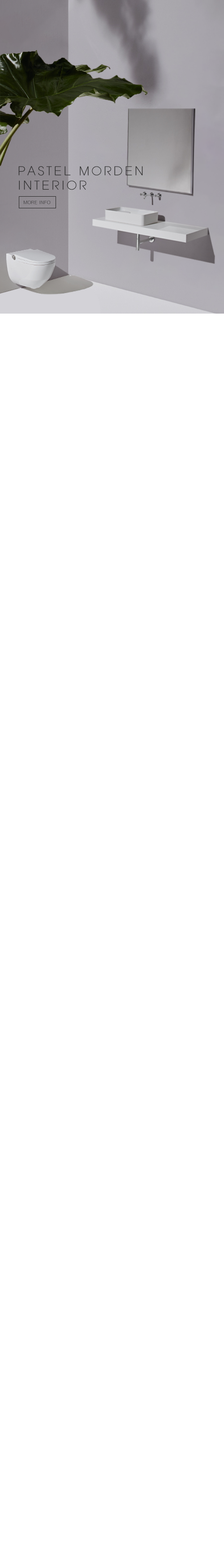
<style>
.page{position:relative;width:224px;height:1568px;background:#ffffff}
.page>*{position:absolute;margin:0}
.t1{font:14.3px/14.3px "HYnamL";letter-spacing:0.1em;color:#292929}
.t2{font:4.8px "Haansoft-Dotum";letter-spacing:0.025em;color:#292929}
</style>
<div class="page">
<p class="t1" style="left:18px;top:166px;width:125px;height:24px">PASTEL MORDEN<br>INTERIOR</p>
<p class="t2" style="left:24px;top:200px;width:27px;height:4px">MORE INFO</p>
</div>
